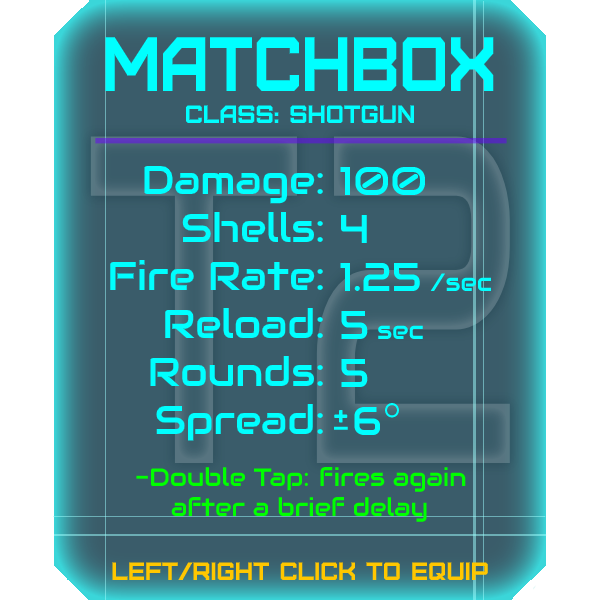
<style>
.page{position:relative;width:600px;height:600px;background:#3a5c6a}
.page>*{position:absolute;margin:0}
.t1{font:76.8px "Furore";color:#00ffff;scale:0.87 1}
.t2{font:25px "Furore";color:#00ffff}
.t3{font:40px "Audiowide-Regular";color:#00ffff}
.t4{font:25px "Audiowide-Regular";color:#00ffff}
.t5{font:25px "Audiowide-Regular";color:#00ff00}
.t6{font:25px "Furore";color:#ffc700}
</style>
<div class="page">
<p class="t1" style="left:105px;top:37px;width:389px;height:54px">matchbox</p>
<p class="t2" style="left:186px;top:105px;width:228px;height:18px">Class: Shotgun</p>
<p class="t3" style="left:110px;top:165px;width:213px;height:276px;text-align:right">Damage:<br>Shells:<br>Fire Rate:<br>Reload:<br>Rounds:<br>Spread:</p>
<p class="t3" style="left:340px;top:166px;width:152px;height:269px">100<br>4<br>1.25 <span class="t4">/sec<br></span>5 <span class="t4">sec<br></span>5<br> 6</p>
<p class="t5" style="left:136px;top:467px;width:330px;height:55px">-Double Tap:   ires again<br> after a brief delay</p>
<p class="t5" style="left:320px;top:467px;width:13px;height:19px">f</p>
<p class="t6" style="left:112px;top:562px;width:376px;height:18px">left/right click to equip</p>
</div>
